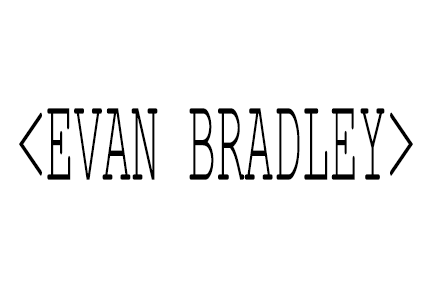
<style>
.page{position:relative;width:432px;height:288px;background:#ffffff}
.page>*{position:absolute;margin:0}
.t1{font:124.6px "CourierNewPSMT";color:#000000;text-transform:uppercase;scale:0.38 1}
</style>
<div class="page">
<p class="t1" style="left:19px;top:108px;width:394px;height:72px">&lt;EVAN BRADLEY&gt;</p>
</div>
